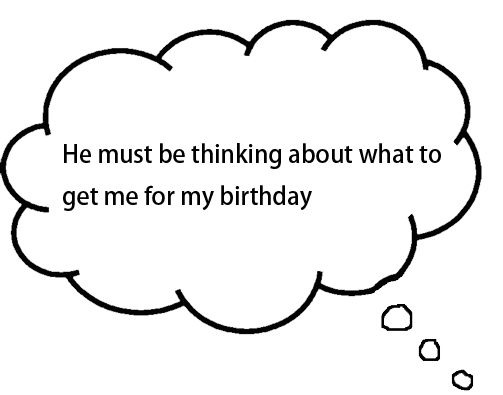
<style>
.page{position:relative;width:503px;height:395px;background:#ffffff}
.page>*{position:absolute;margin:0}
.t1{font:24px "AdobeHeitiStd-Regular";color:#000000}
</style>
<div class="page">
<p class="t1" style="left:63px;top:143px;width:378px;height:68px">He must be thinking about what to <br>get me for my birthday</p>
</div>
